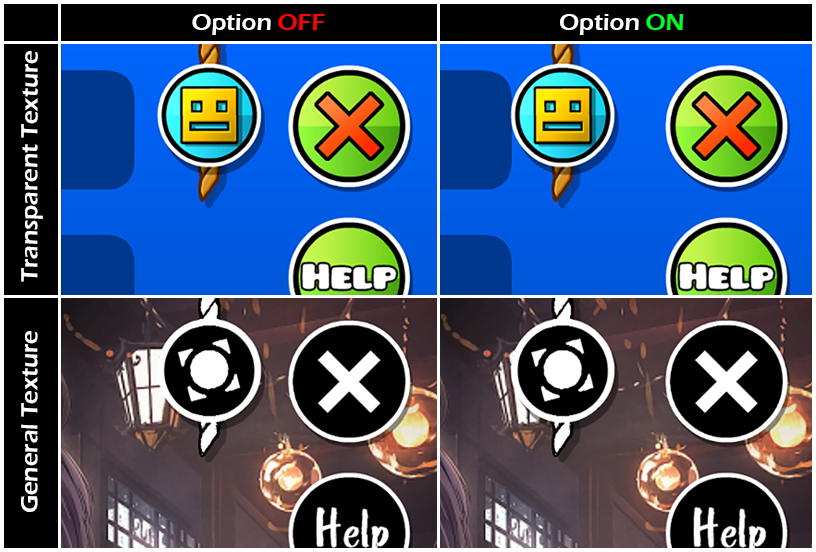
<style>
.page{position:relative;width:816px;height:552px;background:#000000}
.page>*{position:absolute;margin:0}
.t1{font:24px "ErasITC-Demi";color:#ffffff}
.t2{font:24px "ErasITC-Demi";color:#ff0000}
.t3{font:24px "ErasITC-Demi";color:#00ff24}
</style>
<div class="page">
<p class="t1" style="left:192px;top:14px;width:492px;height:21px">Option <span class="t2">OFF</span>                                       Option <span class="t3">ON</span></p>
<p class="t1" style="left:21px;top:51px;width:22px;height:461px;rotate:-90deg">General Texture        Transparent Texture</p>
</div>
